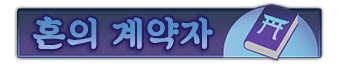
<style>
.page{position:relative;width:338px;height:65px;background:#ffffff}
.page>*{position:absolute;margin:0}
.t1{font:35px "SDKukdetopokki-aLt";letter-spacing:0.04em;font-weight:bold}
.t2{font:35px "SDKukdetopokki-aLt";font-weight:bold}
.t3{font:35px "SDKukdetopokki-aLt";letter-spacing:0.02em;color:#5e95cd;font-weight:bold}
</style>
<div class="page">
<p class="t1" style="left:33px;top:16px;width:184px;height:34px">혼의 계약자</p>
<p class="t2" style="left:33px;top:16px;width:177px;height:34px">혼의 계약자</p>
<p class="t3" style="left:33px;top:16px;width:180px;height:34px">혼의 계약자</p>
</div>
